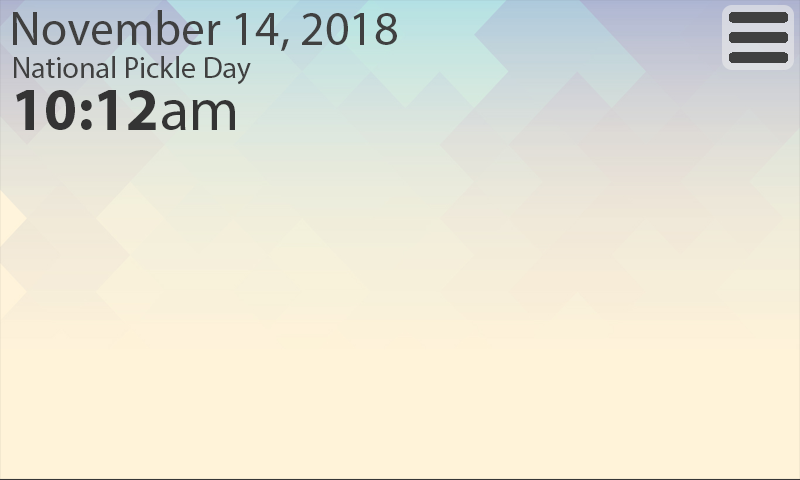
<style>
.page{position:relative;width:800px;height:480px;background:#fff3d9}
.page>*{position:absolute;margin:0}
.t1{font:48px "MyriadPro-Regular";color:#404040}
.t2{font:30px "MyriadPro-Regular";color:#404040}
.t3{font:60px "MyriadPro-Bold";color:#343434}
.t4{font:60px "MyriadPro-Regular";color:#343434}
</style>
<div class="page">
<p class="t1" style="left:13px;top:10px;width:384px;height:41px">November 14, 2018</p>
<p class="t2" style="left:14px;top:56px;width:237px;height:29px">National Pickle Day</p>
<p class="t3" style="left:16px;top:90px;width:219px;height:40px">10:12<span class="t4">am</span></p>
</div>
